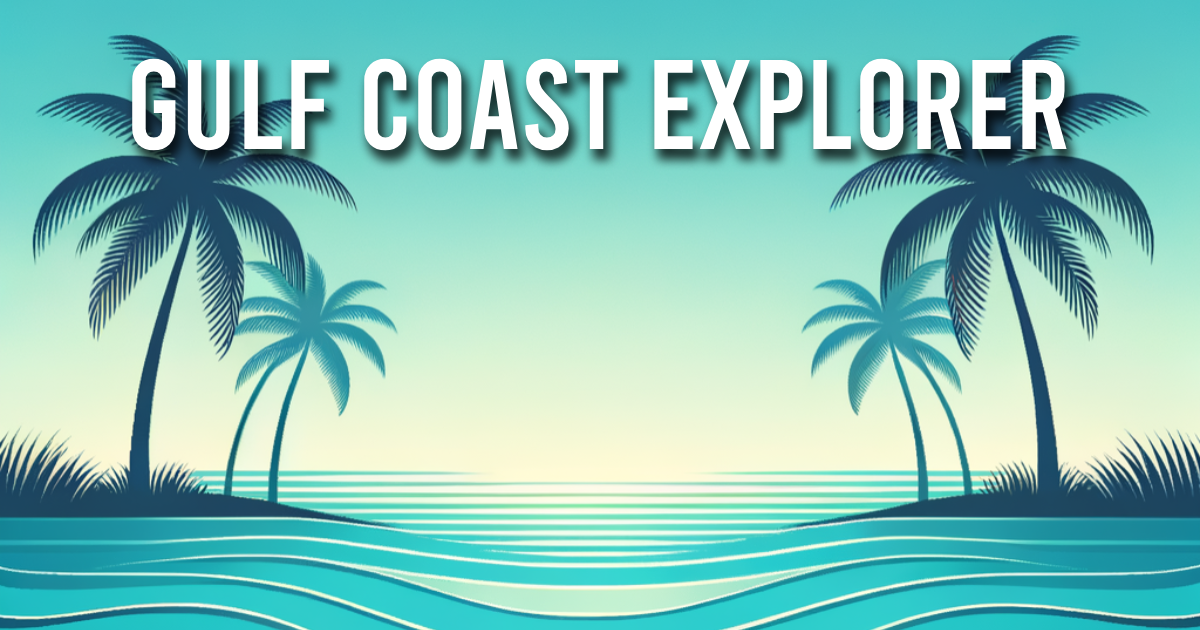
<style>
.page{position:relative;width:1200px;height:630px}
.page>*{position:absolute;margin:0}
.t1{font:127px "Bebas-Regular";color:#ffffff}
</style>
<div class="page">
<p class="t1" style="left:132px;top:58px;width:935px;height:93px">Gulf Coast Explorer</p>
</div>
